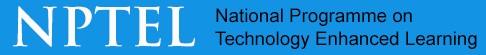
<style>
.page{position:relative;width:486px;height:55px;background:#1293e4}
.page>*{position:absolute;margin:0}
.t1{font:52.1px "TrajanPro-Bold";color:#fcfcfd}
.t2{font:18.8px "ArialMT";color:#000000}
</style>
<div class="page">
<p class="t1" style="left:13px;top:6px;width:182px;height:41px">NPTEL</p>
<p class="t2" style="left:215px;top:8px;width:262px;height:41px">National Programme on<br>Technology Enhanced Learning</p>
</div>
